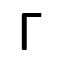
<style>
.page{position:relative;width:64px;height:64px;background:#ffffff}
.page>*{position:absolute;margin:0}
.t1{font:58.3px "Calibri";color:#000000}
</style>
<div class="page">
<p class="t1" style="left:21px;top:13px;width:21px;height:37px">Г</p>
</div>
